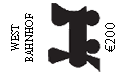
<style>
.page{position:relative;width:124px;height:76px;background:#ffffff}
.page>*{position:absolute;margin:0}
.t1{font:12px "AdobeDevanagari-Regular";color:#000000;scale:0.9 1}
.t2{font:14px "MyriadPro-Regular";color:#000000}
</style>
<div class="page">
<p class="t1" style="left:11px;top:13px;width:22px;height:49px;text-align:center;rotate:-90deg">WEST<br>BAHNHOF</p>
<p class="t2" style="left:105px;top:23px;width:10px;height:29px;rotate:-90deg">€200</p>
</div>
